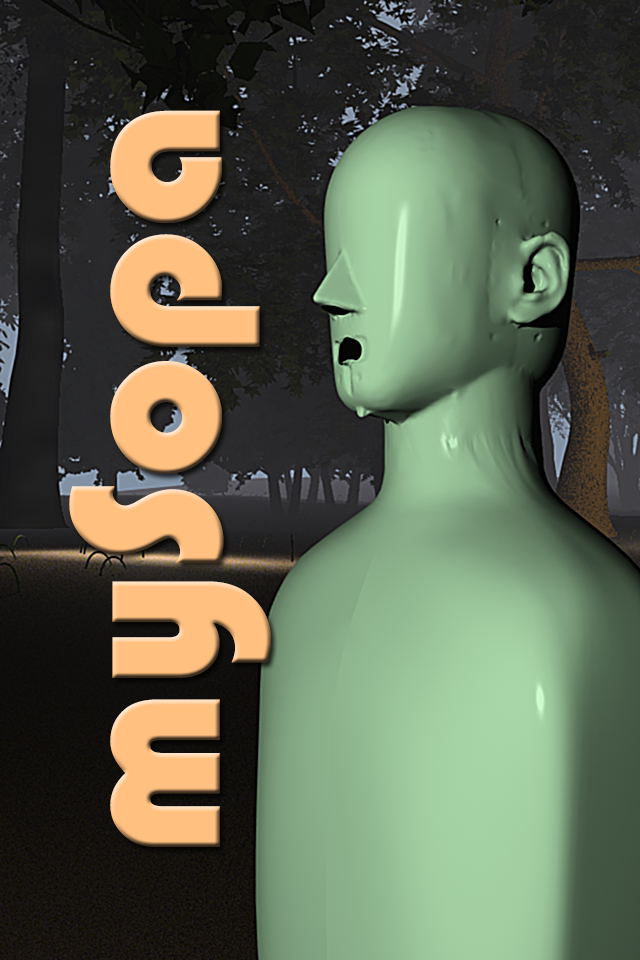
<style>
.page{position:relative;width:640px;height:960px}
.page>*{position:absolute;margin:0}
.t1{font:220px "Bauhaus93";color:#ffc080}
</style>
<div class="page">
<p class="t1" style="left:69px;top:110px;width:202px;height:737px;rotate:-90deg">mySopa</p>
</div>
